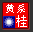
<style>
.page{position:relative;width:33px;height:32px;background:#f20000}
.page>*{position:absolute;margin:0}
.t1{font:10.4px "SimSun";color:#ffffff}
.t2{font:11.7px "SimSun";color:#ffffff}
</style>
<div class="page">
<p class="t1" style="left:6px;top:4px;width:19px;height:9px">黄系</p>
<p class="t2" style="left:16px;top:15px;width:11px;height:12px">桂</p>
</div>
